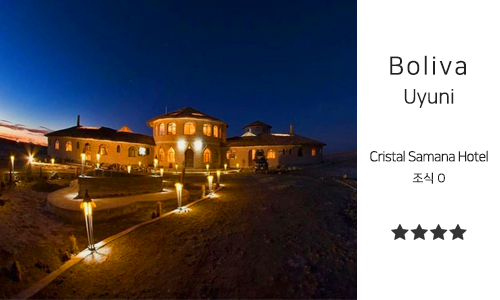
<style>
.page{position:relative;width:500px;height:300px;background:#ffffff}
.page>*{position:absolute;margin:0}
.t1{font:25px "NanumSquareR";letter-spacing:0.1em;color:#222222}
.t2{font:20px "NanumSquareR";color:#222222}
.t3{font:14px "NanumSquareR";letter-spacing:-0.05em;color:#222222}
.t4{font:12px "NanumSquareR";color:#222222}
</style>
<div class="page">
<p class="t1" style="left:390px;top:55px;width:76px;height:20px">Boliva</p>
<p class="t2" style="left:404px;top:89px;width:50px;height:19px">Uyuni</p>
<p class="t3" style="left:370px;top:150px;width:118px;height:12px">Cristal Samana Hotel</p>
<p class="t4" style="left:412px;top:172px;width:33px;height:12px">조식 O</p>
</div>
